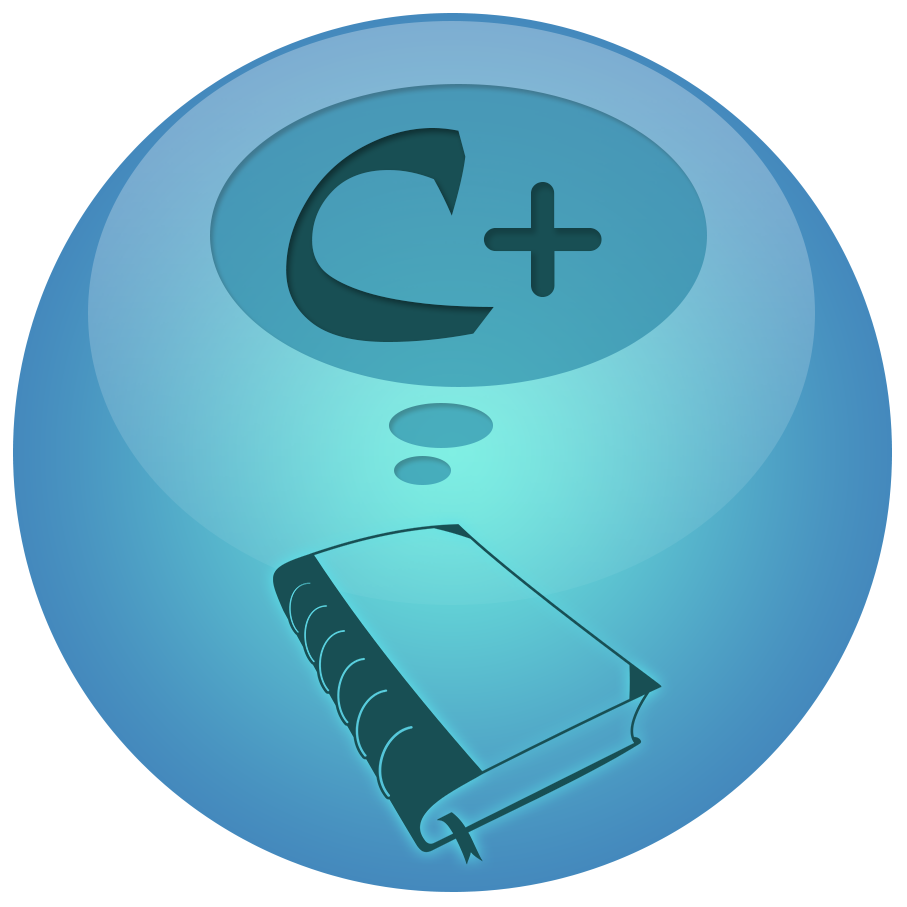
<style>
.page{position:relative;width:907px;height:907px;background:#ffffff}
.page>*{position:absolute;margin:0}
.t1{font:236px "MaturaMTScriptCapitals";color:#184f54}
.t2{font:280.2px "OCRAExtended";color:#184e53}
</style>
<div class="page">
<p class="t1" style="left:286px;top:128px;width:208px;height:214px">C</p>
<p class="t2" style="left:483px;top:182px;width:119px;height:115px">+</p>
</div>
